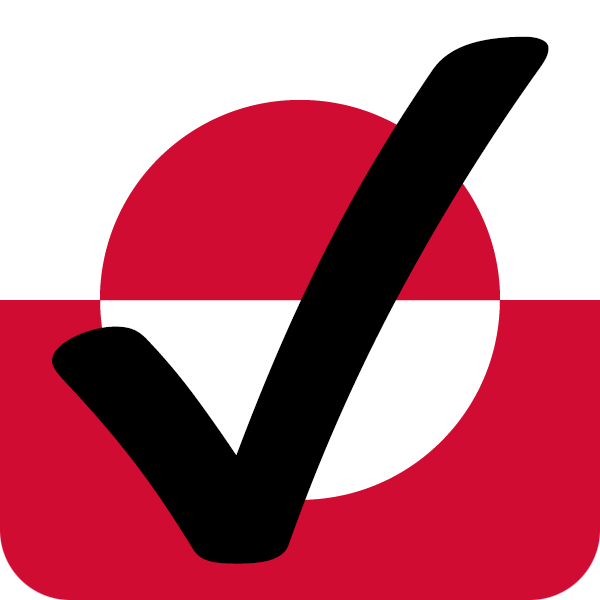
<style>
.page{position:relative;width:600px;height:600px;background:#d00c33}
.page>*{position:absolute;margin:0}
.t1{font:700px "SegoeUISymbol";letter-spacing:0.01em;color:#000000}
</style>
<div class="page">
<p class="t1" style="left:52px;top:36px;width:497px;height:528px">✔</p>
</div>
